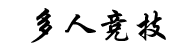
<style>
.page{position:relative;width:186px;height:48px;background:#ffffff}
.page>*{position:absolute;margin:0}
.t1{font:36px "STXingkai";color:#000000}
</style>
<div class="page">
<p class="t1" style="left:31px;top:8px;width:135px;height:35px">多人竞技</p>
</div>
